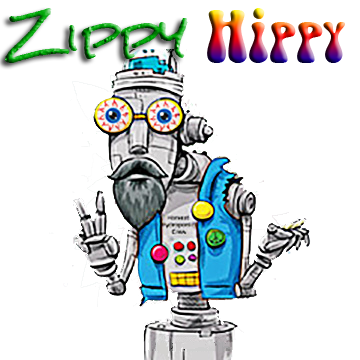
<style>
.page{position:relative;width:360px;height:360px;background:#ffffff}
.page>*{position:absolute;margin:0}
.t1{font:50px "RockSalt"}
.t2{font:63px "BellybeansFG"}
</style>
<div class="page">
<p class="t1" style="left:5px;top:8px;width:183px;height:55px">Zippy</p>
<p class="t2" style="left:207px;top:8px;width:138px;height:55px">Hippy</p>
</div>
